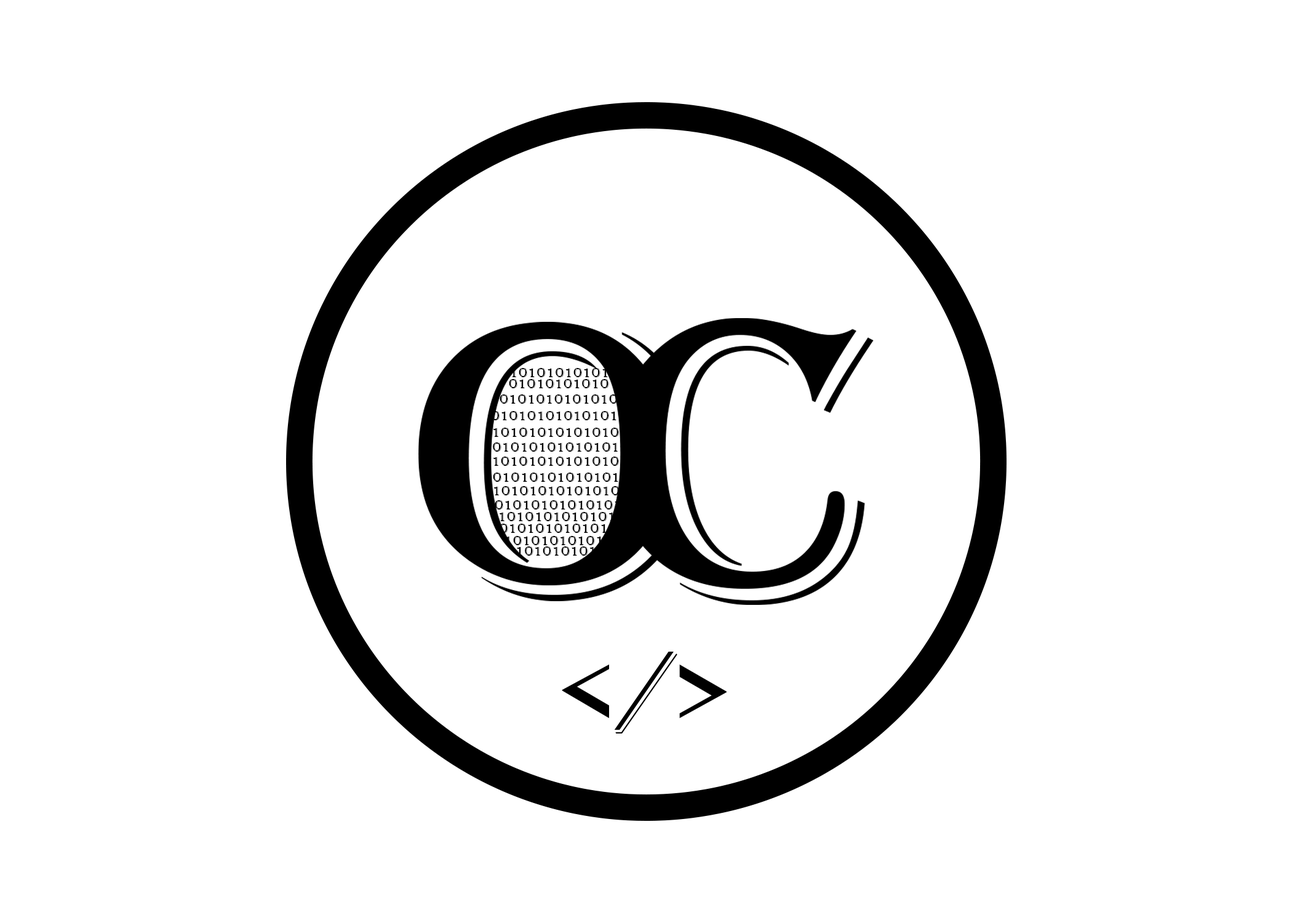
<style>
.page{position:relative;width:1292px;height:923px;background:#ffffff}
.page>*{position:absolute;margin:0}
.t1{font:13.2px "Algerian";color:#000000;scale:1.16 1}
.t2{font:97px "Algerian";letter-spacing:0.03em;color:#000000;scale:1.16 1}
</style>
<div class="page">
<p class="t1" style="left:511px;top:368px;width:163px;height:9px">101010101010101010</p>
<p class="t1" style="left:509px;top:379px;width:100px;height:9px">01010101010</p>
<p class="t1" style="left:500px;top:394px;width:136px;height:10px">010101010101010</p>
<p class="t1" style="left:491px;top:411px;width:173px;height:9px">0101010101010101010</p>
<p class="t1" style="left:493px;top:428px;width:163px;height:9px">101010101010101010</p>
<p class="t1" style="left:485px;top:442px;width:162px;height:10px">101010101010101010</p>
<p class="t1" style="left:493px;top:457px;width:163px;height:9px">101010101010101010</p>
<p class="t1" style="left:485px;top:473px;width:163px;height:9px">101010101010101010</p>
<p class="t1" style="left:493px;top:486px;width:163px;height:9px">101010101010101010</p>
<p class="t1" style="left:487px;top:500px;width:163px;height:9px">101010101010101010</p>
<p class="t1" style="left:499px;top:512px;width:163px;height:9px">101010101010101010</p>
<p class="t1" style="left:500px;top:524px;width:136px;height:9px">010101010101010</p>
<p class="t1" style="left:505px;top:536px;width:163px;height:9px">101010101010101010</p>
<p class="t1" style="left:517px;top:546px;width:97px;height:10px">10101010101</p>
<p class="t2" style="left:562px;top:652px;width:165px;height:81px">&lt;/&gt;</p>
</div>
